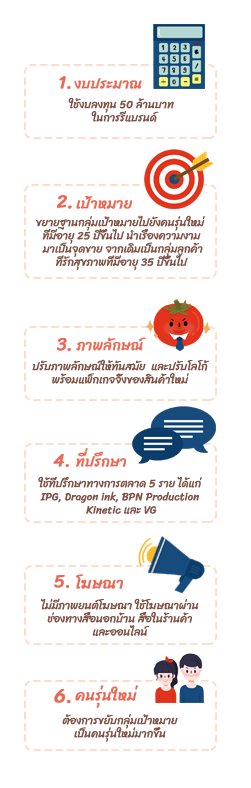
<style>
.page{position:relative;width:251px;height:788px;background:#ffffff}
.page>*{position:absolute;margin:0}
.t1{font:11px "Sriracha-Regular";color:#7e5247}
</style>
<div class="page">
<p class="t1" style="left:68px;top:97px;width:106px;height:25px;text-align:center">ใช้งบลงทุน 50 ล้านบาท  <br>ในการรีแบรนด์</p>
<p class="t1" style="left:36px;top:215px;width:169px;height:56px;text-align:center">ขยายฐานกลุ่มเป้าหมายไปยังคนรุ่นใหม่ <br>ที่มีอายุ 25 ปีขึ้นไป นำเรื่องความงาม<br> มาเป็นจุดขาย จากเดิมเป็นกลุ่มลูกค้า<br> ที่รักสุขภาพที่มีอายุ 35 ปีขึ้นไป</p>
<p class="t1" style="left:32px;top:359px;width:177px;height:25px;text-align:center">ปรับภาพลักษณ์ให้ทันสมัย  และปรับโลโก้ <br>พร้อมแพ็กเกจจิ้งของสินค้าใหม่</p>
<p class="t1" style="left:38px;top:476px;width:164px;height:38px;text-align:center">ใช้ที่ปรึกษาทางการตลาด 5 ราย ได้แก่ <br>IPG, Dragon ink, BPN Production <br>Kinetic และ VG</p>
<p class="t1" style="left:40px;top:598px;width:159px;height:38px;text-align:center">ไม่มีภาพยนต์โฆษณา ใช้โฆษณาผ่าน <br>ช่องทางสื่อนอกบ้าน สื่อในร้านค้า <br>และออนไลน์</p>
<p class="t1" style="left:62px;top:714px;width:116px;height:28px;text-align:center">ต้องการขยับกลุ่มเป้าหมาย <br>เป็นคนรุ่นใหม่มากขึ้น</p>
</div>
